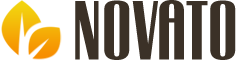
<style>
.page{position:relative;width:237px;height:60px;background:#ffffff}
.page>*{position:absolute;margin:0}
.t1{font:72px "Gogobig";color:#272727;text-transform:uppercase}
</style>
<div class="page">
<p class="t1" style="left:75px;top:0px;width:161px;height:60px">Novato</p>
</div>
